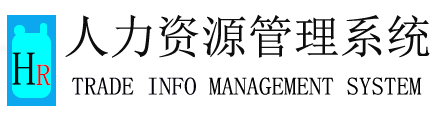
<style>
.page{position:relative;width:441px;height:116px;background:#ffffff}
.page>*{position:absolute;margin:0}
.t1{font:46px "SimSun";color:#0e0d0d}
.t2{font:48px "SimSun";color:#090a09}
.t3{font:30px "SimSun";color:#fc030f}
.t4{font:25px "SimSun";color:#000000}
.t5{font:25px "SimSun";color:#04030b}
</style>
<div class="page">
<p class="t1" style="left:65px;top:14px;width:365px;height:44px">人力资源管理系统</p>
<p class="t2" style="left:12px;top:52px;width:39px;height:33px">H<span class="t3">R</span></p>
<p class="t4" style="left:72px;top:77px;width:350px;height:18px"><span class="t5">TRADE INFO </span>MANAGEMENT SYSTEM</p>
</div>
